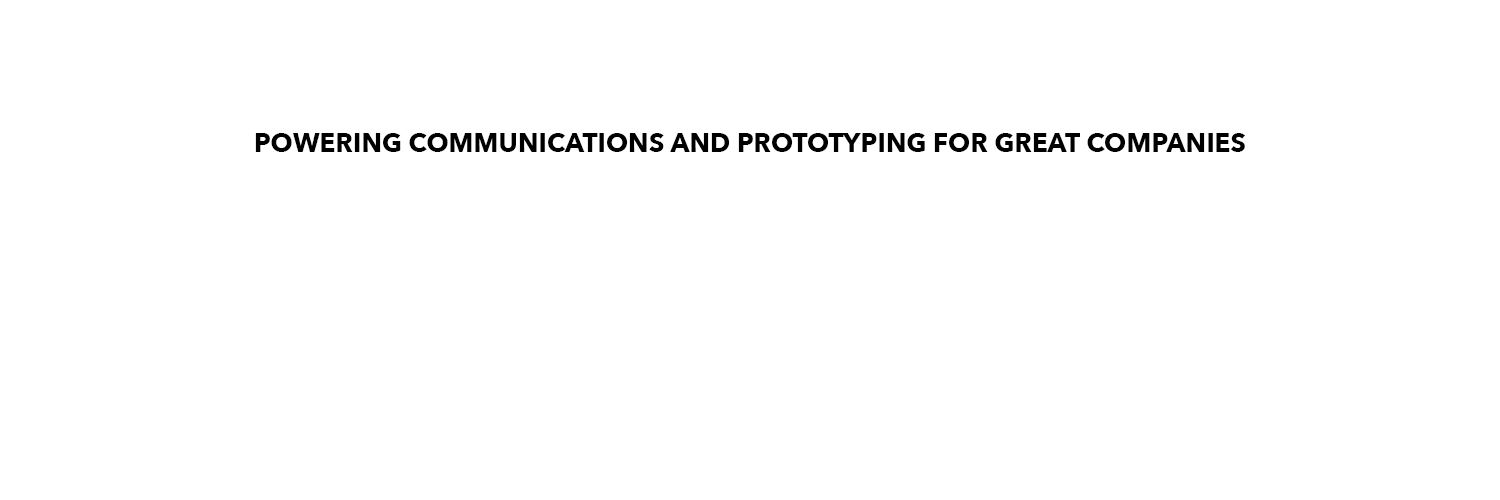
<style>
.page{position:relative;width:1500px;height:500px;background:#ffffff}
.page>*{position:absolute;margin:0}
.t1{font:27.5px "AvenirNext-Bold";color:#000000;scale:0.95 1}
</style>
<div class="page">
<p class="t1" style="left:255px;top:133px;width:990px;height:19px">POWERING COMMUNICATIONS AND PROTOTYPING FOR GREAT COMPANIES</p>
</div>
